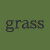
<style>
.page{position:relative;width:50px;height:50px;background:#5b733f}
.page>*{position:absolute;margin:0}
.t1{font:16px "SawarabiMincho-Medium";color:#323433}
</style>
<div class="page">
<p class="t1" style="left:5px;top:20px;width:40px;height:12px">grass</p>
</div>
